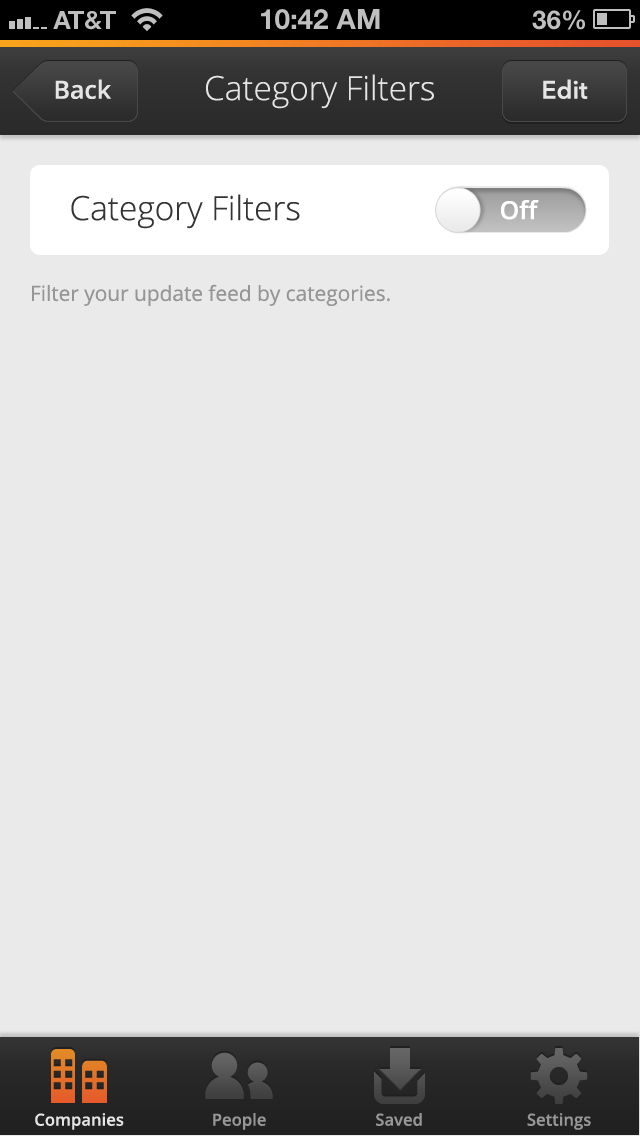
<style>
.page{position:relative;width:640px;height:1136px;background:#eaeaea}
.page>*{position:absolute;margin:0}
.t1{font:33.3px "OpenSans-Light";color:#e5e5e5}
.t2{font:25px "OpenSans-Semibold";color:#e5e5e5}
.t3{font:25px "AvenirNext-DemiBold";color:#e5e5e5}
.t4{font:33.3px "OpenSans-Light";color:#343434}
.t5{font:25px "OpenSans-Semibold";color:#ffffff}
.t6{font:20.8px "OpenSans";color:#969696}
.t7{font:16.7px "OpenSans-Semibold";color:#e5e5e5}
.t8{font:16.7px "OpenSans-Semibold";color:#969696}
</style>
<div class="page">
<p class="t1" style="left:206px;top:74px;width:228px;height:35px">Category Filters</p>
<p class="t2" style="left:55px;top:79px;width:57px;height:20px">Back</p>
<p class="t3" style="left:543px;top:79px;width:45px;height:20px">Edit</p>
<p class="t4" style="left:71px;top:194px;width:229px;height:35px">Category Filters</p>
<p class="t5" style="left:501px;top:200px;width:38px;height:20px">Off</p>
<p class="t6" style="left:32px;top:284px;width:358px;height:22px">Filter your update feed by categories.</p>
<p class="t7" style="left:35px;top:1113px;width:89px;height:17px">Companies</p>
<p class="t8" style="left:213px;top:1113px;width:53px;height:17px">People</p>
<p class="t8" style="left:376px;top:1113px;width:46px;height:13px">Saved</p>
<p class="t8" style="left:527px;top:1113px;width:64px;height:17px">Settings</p>
</div>
